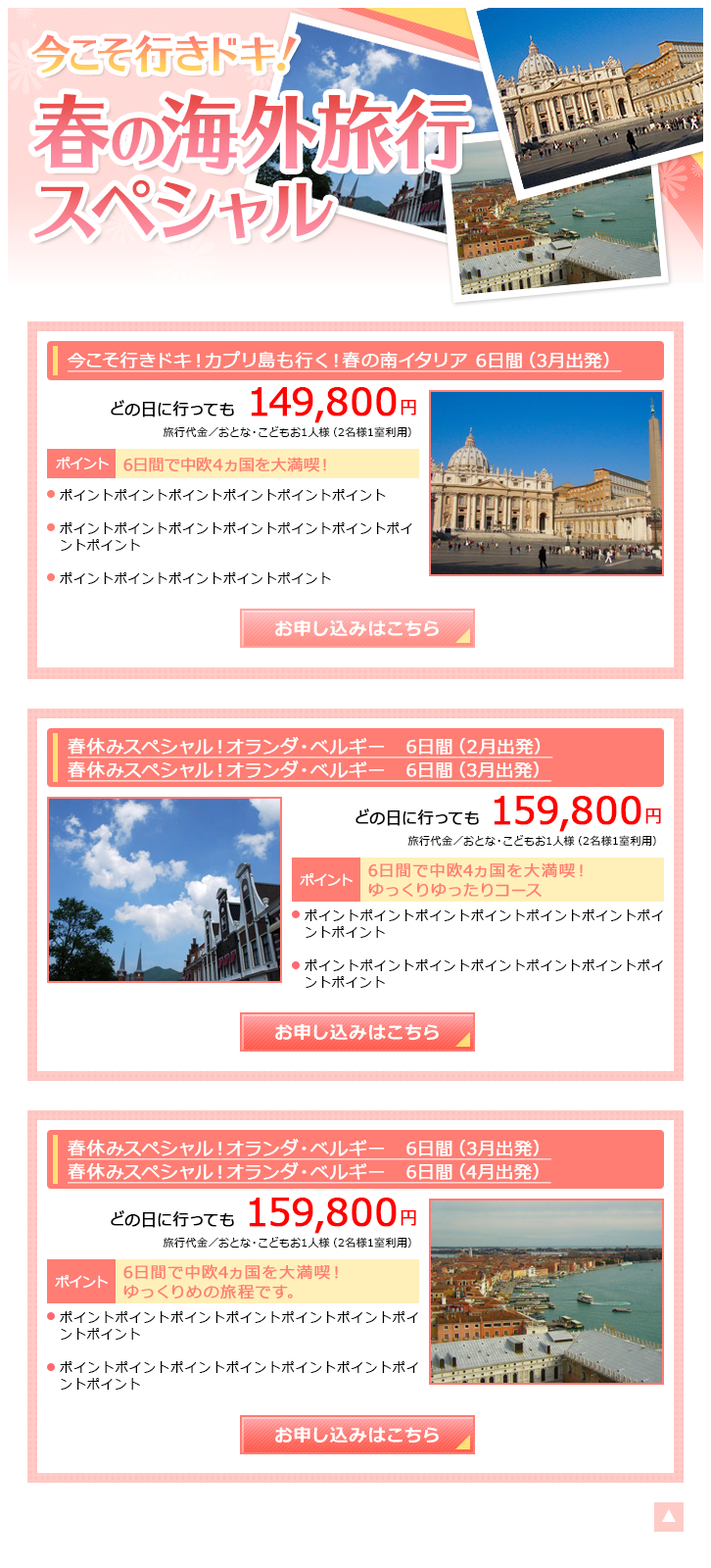
<style>
.page{position:relative;width:711px;height:1568px;background:#ffffff}
.page>*{position:absolute;margin:0}
.t1{font:39.2px "UDTypos515Std-Regular";font-weight:bold}
.t2{font:78.4px "UDTypos515Std-Regular";font-weight:bold}
.t3{font:58.8px "UDTypos515Std-Regular";font-weight:bold}
.t4{font:68.6px "UDTypos515Std-Regular";font-weight:bold}
.t5{font:17.6px "Meiryo";letter-spacing:0.05em;color:#ffffff;font-weight:bold;text-decoration:underline}
.t6{font:37.2px "Meiryo";letter-spacing:0.025em;color:#ff0000;font-weight:bold}
.t7{font:17.6px "Meiryo";letter-spacing:0.025em;color:#ff0000;font-weight:bold}
.t8{font:15.7px "Meiryo";letter-spacing:0.05em;color:#000000;font-weight:bold}
.t9{font:10.8px "Meiryo";letter-spacing:0.05em;color:#000000}
.t10{font:13.7px "Meiryo";color:#ffffff;font-weight:bold}
.t11{font:15.7px "Meiryo";color:#ff7d73;font-weight:bold}
.t12{font:12.7px/16.7px "Meiryo";letter-spacing:0.07em;color:#000000}
.t13{font:17.6px "Meiryo-Bold";letter-spacing:0.05em;color:#ffffff}
.t14{font:17.6px/23.5px "Meiryo";letter-spacing:0.05em;color:#ffffff;font-weight:bold;text-decoration:underline}
.t15{font:15.7px/19.6px "Meiryo";letter-spacing:0.07em;color:#ff7d73;font-weight:bold}
</style>
<div class="page">
<p class="t1" style="left:31px;top:34px;width:266px;height:40px">今こそ行きドキ！</p>
<p class="t2" style="left:33px;top:94px;width:436px;height:76px">春<span class="t3">の</span>海外旅行</p>
<p class="t4" style="left:34px;top:179px;width:299px;height:60px">スペシャル</p>
<p class="t5" style="left:68px;top:351px;width:554px;height:21px">今こそ行きドキ！カプリ島も行く！春の南イタリア 6日間（3月出発）</p>
<p class="t6" style="left:251px;top:387px;width:165px;height:36px">149,800<span class="t7">円</span></p>
<p class="t8" style="left:111px;top:400px;width:123px;height:17px">どの日に行っても</p>
<p class="t9" style="left:163px;top:426px;width:249px;height:11px">旅行代金／おとな・こどもお1人様（2名様1室利用）</p>
<p class="t10" style="left:56px;top:456px;width:53px;height:14px">ポイント</p>
<p class="t11" style="left:123px;top:457px;width:203px;height:15px">6日間で中欧４ヵ国を大満喫！</p>
<p class="t12" style="left:60px;top:489px;width:353px;height:95px">ポイントポイントポイントポイントポイントポイント<br><br>ポイントポイントポイントポイントポイントポイントポイントポイント<br><br>ポイントポイントポイントポイントポイント</p>
<p class="t13" style="left:275px;top:620px;width:164px;height:17px">お申し込みはこちら</p>
<p class="t14" style="left:68px;top:737px;width:486px;height:45px">春休みスペシャル！オランダ・ベルギー　6日間（2月出発）<br>春休みスペシャル！オランダ・ベルギー　6日間（3月出発）</p>
<p class="t6" style="left:494px;top:796px;width:168px;height:36px">159,800<span class="t7">円</span></p>
<p class="t8" style="left:356px;top:808px;width:123px;height:18px">どの日に行っても</p>
<p class="t9" style="left:408px;top:835px;width:249px;height:11px">旅行代金／おとな・こどもお1人様（2名様1室利用）</p>
<p class="t15" style="left:368px;top:862px;width:215px;height:36px">6日間で中欧4ヵ国を大満喫！<br>ゆっくりゆったりコース</p>
<p class="t10" style="left:300px;top:872px;width:53px;height:15px">ポイント</p>
<p class="t12" style="left:305px;top:909px;width:358px;height:79px;text-align:justify">ポイントポイントポイントポイントポイントポイントポイントポイント<br><br>ポイントポイントポイントポイントポイントポイントポイントポイント</p>
<p class="t13" style="left:275px;top:1024px;width:164px;height:17px">お申し込みはこちら</p>
<p class="t14" style="left:68px;top:1139px;width:484px;height:45px">春休みスペシャル！オランダ・ベルギー　6日間（3月出発）<br>春休みスペシャル！オランダ・ベルギー　6日間（4月出発）</p>
<p class="t6" style="left:249px;top:1198px;width:167px;height:36px">159,800<span class="t7">円</span></p>
<p class="t8" style="left:111px;top:1210px;width:123px;height:18px">どの日に行っても</p>
<p class="t9" style="left:163px;top:1237px;width:249px;height:11px">旅行代金／おとな・こどもお1人様（2名様1室利用）</p>
<p class="t15" style="left:123px;top:1264px;width:215px;height:35px">6日間で中欧4ヵ国を大満喫！<br>ゆっくりめの旅程です。</p>
<p class="t10" style="left:55px;top:1274px;width:53px;height:15px">ポイント</p>
<p class="t12" style="left:60px;top:1311px;width:358px;height:79px;text-align:justify">ポイントポイントポイントポイントポイントポイントポイントポイント<br><br>ポイントポイントポイントポイントポイントポイントポイントポイント</p>
<p class="t13" style="left:275px;top:1427px;width:164px;height:17px">お申し込みはこちら</p>
</div>
